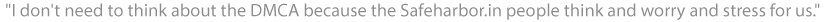
<style>
.page{position:relative;width:828px;height:22px;background:#ffffff}
.page>*{position:absolute;margin:0}
.t1{font:18px "MyriadPro-Regular";color:#8b8b8b}
</style>
<div class="page">
<p class="t1" style="left:6px;top:3px;width:814px;height:18px">"I don't need to think about the DMCA because the Safeharbor.in people think and worry and stress for us."</p>
</div>
